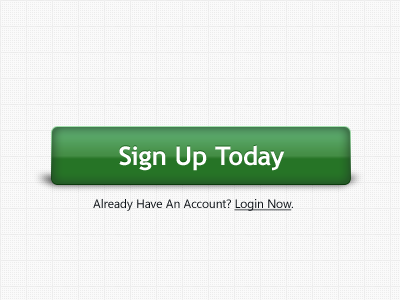
<style>
.page{position:relative;width:400px;height:300px;background:#fafafa}
.page>*{position:absolute;margin:0}
.t1{font:26px "TrebuchetMS-Bold";color:#ffffff}
.t2{font:12px "SegoeUI";color:#0b1015}
.t3{font:12px "SegoeUI";color:#0b1015;text-decoration:underline}
</style>
<div class="page">
<p class="t1" style="left:119px;top:145px;width:166px;height:26px">Sign Up Today</p>
<p class="t2" style="left:93px;top:199px;width:200px;height:12px">Already Have An Account? <span class="t3">Login Now</span>.</p>
</div>
